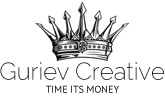
<style>
.page{position:relative;width:165px;height:108px;background:#ffffff}
.page>*{position:absolute;margin:0}
.t1{font:24px "Raleway-ExtraLight";color:#0a0a0a}
.t2{font:10px "PTSans-Regular";color:#0a0a0a}
</style>
<div class="page">
<p class="t1" style="left:0px;top:62px;width:165px;height:18px">Guriev Creative</p>
<p class="t2" style="left:46px;top:85px;width:73px;height:8px">TIME ITS MONEY</p>
</div>
